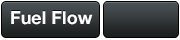
<style>
.page{position:relative;width:180px;height:40px}
.page>*{position:absolute;margin:0}
.t1{font:18px "HelveticaNeue-Bold";color:#ffffff}
</style>
<div class="page">
<p class="t1" style="left:11px;top:11px;width:82px;height:14px">Fuel Flow</p>
</div>
